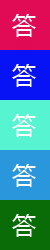
<style>
.page{position:relative;width:50px;height:250px}
.page>*{position:absolute;margin:0}
.t1{font:24px "MicrosoftYaHei";color:#ffffff}
</style>
<div class="page">
<p class="t1" style="left:12px;top:14px;width:24px;height:23px">答</p>
</div>
